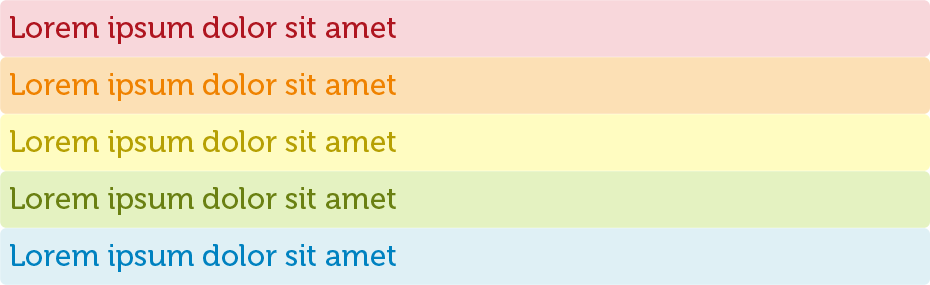
<style>
.page{position:relative;width:930px;height:285px}
.page>*{position:absolute;margin:0}
.t1{font:30px "Museo-500";color:#af1520}
.t2{font:30px "Museo-500";color:#ef8200}
.t3{font:30px "Museo-500";color:#b6a003}
.t4{font:30px "Museo-500";color:#6a8012}
.t5{font:30px "Museo-500";color:#0082c0}
</style>
<div class="page">
<p class="t1" style="left:10px;top:16px;width:386px;height:28px">Lorem ipsum dolor sit amet</p>
<p class="t2" style="left:10px;top:73px;width:386px;height:28px">Lorem ipsum dolor sit amet</p>
<p class="t3" style="left:10px;top:130px;width:386px;height:28px">Lorem ipsum dolor sit amet</p>
<p class="t4" style="left:10px;top:187px;width:386px;height:28px">Lorem ipsum dolor sit amet</p>
<p class="t5" style="left:10px;top:244px;width:386px;height:28px">Lorem ipsum dolor sit amet</p>
</div>
